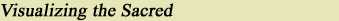
<style>
.page{position:relative;width:339px;height:21px;background:#e6e6b8}
.page>*{position:absolute;margin:0}
.t1{font:18px "TimesNewRomanPSMT";color:#010101;font-weight:bold;font-style:italic}
</style>
<div class="page">
<p class="t1" style="left:1px;top:3px;width:173px;height:18px">Visualizing the Sacred</p>
</div>
